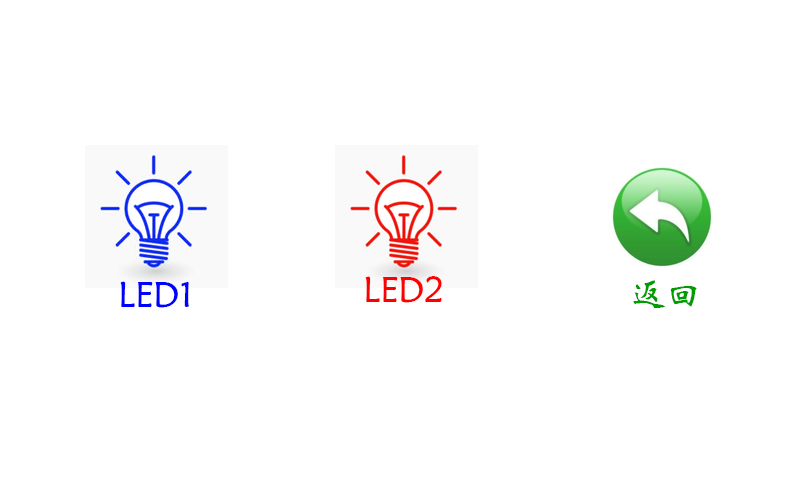
<style>
.page{position:relative;width:800px;height:480px;background:#ffffff}
.page>*{position:absolute;margin:0}
.t1{font:36px "STXinwei";color:#0000ff}
.t2{font:36px "STXinwei";color:#ff0000}
.t3{font:36px "STXinwei";color:#009c00}
</style>
<div class="page">
<p class="t1" style="left:120px;top:281px;width:69px;height:27px">LED1</p>
<p class="t2" style="left:365px;top:276px;width:77px;height:27px">LED2</p>
<p class="t3" style="left:633px;top:280px;width:64px;height:28px">返回</p>
</div>
